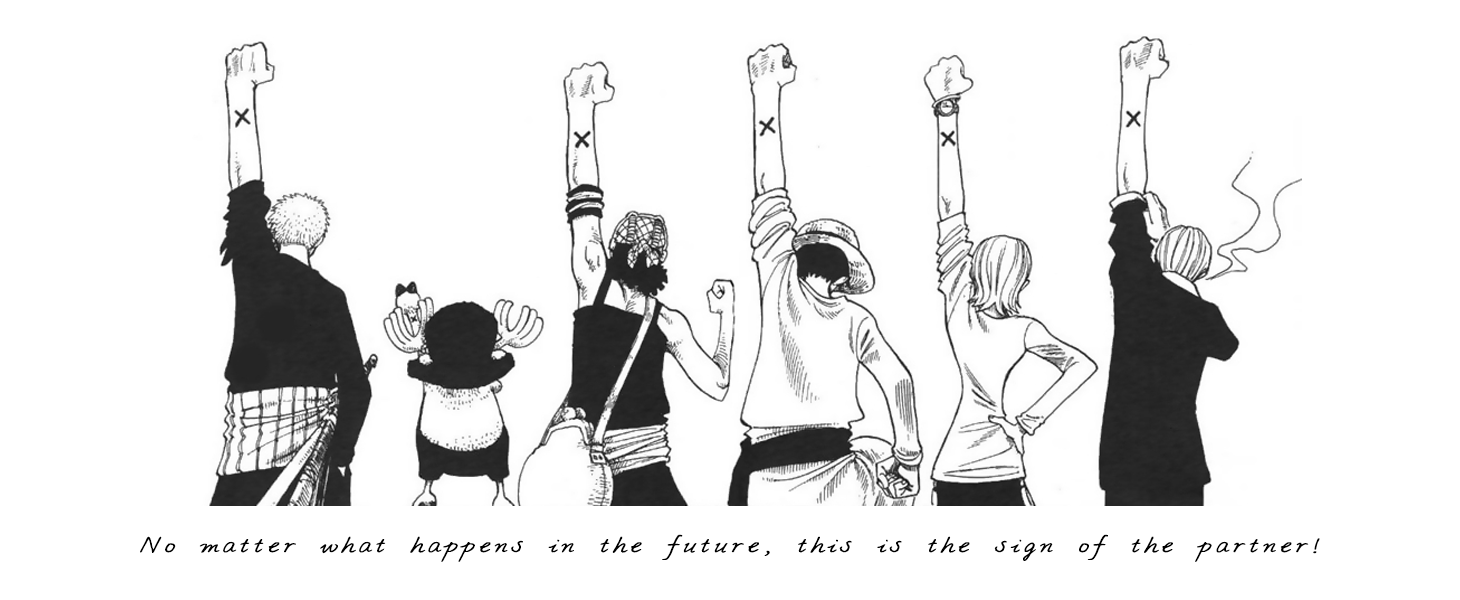
<style>
.page{position:relative;width:1460px;height:600px;background:#ffffff}
.page>*{position:absolute;margin:0}
.t1{font:25.9px "chenwixun-jian";letter-spacing:0.1em;color:#000000;scale:1.39 1}
</style>
<div class="page">
<p class="t1" style="left:140px;top:534px;width:1180px;height:28px">No matter what happens in the future, this is the sign of the partner!</p>
</div>
